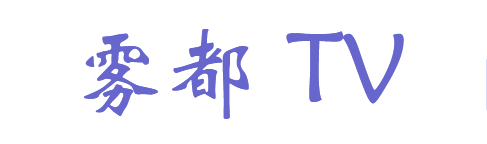
<style>
.page{position:relative;width:487px;height:144px;background:#ffffff}
.page>*{position:absolute;margin:0}
.t1{font:97px "STXinwei";color:#6666cc}
</style>
<div class="page">
<p class="t1" style="left:84px;top:29px;width:320px;height:90px">雾都 TV</p>
</div>
